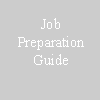
<style>
.page{position:relative;width:100px;height:100px;background:#cccccc}
.page>*{position:absolute;margin:0}
.t1{font:14.7px "TimesNewRomanPSMT";color:#ffffff}
</style>
<div class="page">
<p class="t1" style="left:18px;top:18px;width:66px;height:47px;text-align:center">Job<br>Preparation<br>Guide</p>
</div>
